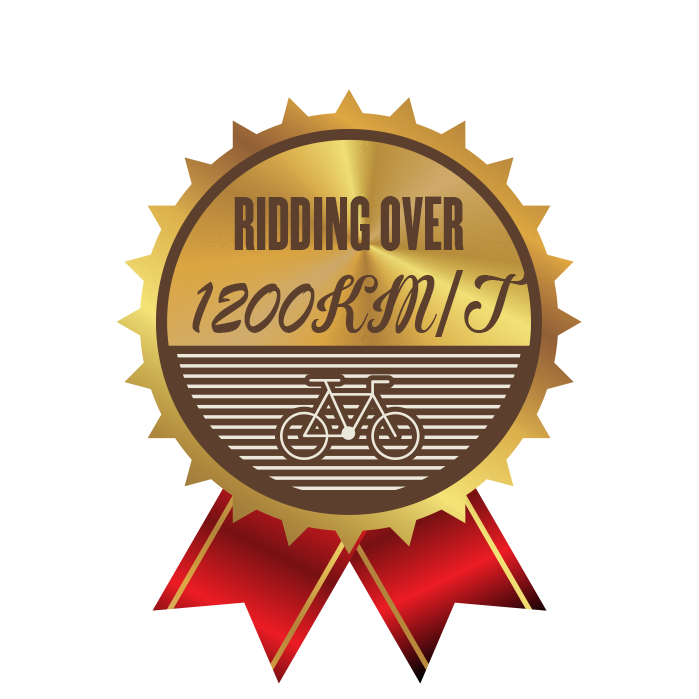
<style>
.page{position:relative;width:699px;height:699px;background:#ffffff}
.page>*{position:absolute;margin:0}
.t1{font:66.7px "Champion-HTF-Featherweight";color:#5c3f2d}
.t2{font:81.3px "BrushScriptMT";color:#5c3f2d;scale:0.94 1}
.t3{font:81.3px "BrannbollNyPersonalUseOnly";color:#5c3f2d;scale:0.94 1}
.t4{font:81.3px "AdobeHeitiStd-Regular";color:#5c3f2d;scale:0.94 1}
</style>
<div class="page">
<p class="t1" style="left:234px;top:196px;width:230px;height:55px">RIDDING OVER</p>
<p class="t2" style="left:192px;top:270px;width:338px;height:67px">1200<span class="t3">KM</span><span class="t4">/</span><span class="t3">T</span></p>
</div>
